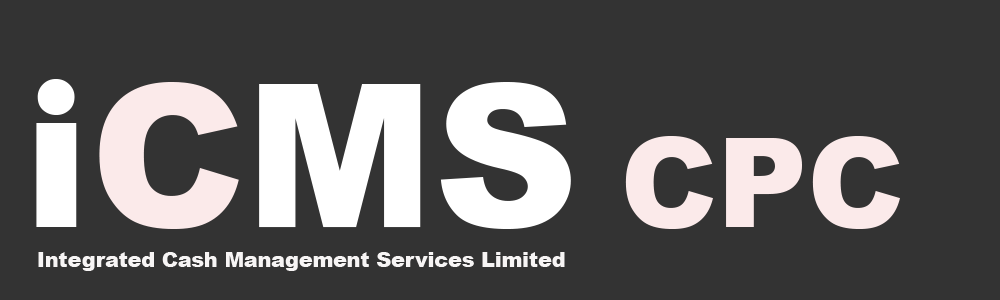
<style>
.page{position:relative;width:1000px;height:300px;background:#333333}
.page>*{position:absolute;margin:0}
.t1{font:250px "ArialRoundedMTBold";color:#ffffff}
.t2{font:125px "Arial-Black";color:#fbeaea}
.t3{font:20.5px "Arial-Black";color:#f7f5f5}
</style>
<div class="page">
<p class="t1" style="left:37px;top:79px;width:38px;height:36px">.</p>
<p class="t2" style="left:625px;top:136px;width:275px;height:93px">CPC</p>
<p class="t3" style="left:38px;top:252px;width:527px;height:19px">Integrated Cash Management Services Limited</p>
</div>
